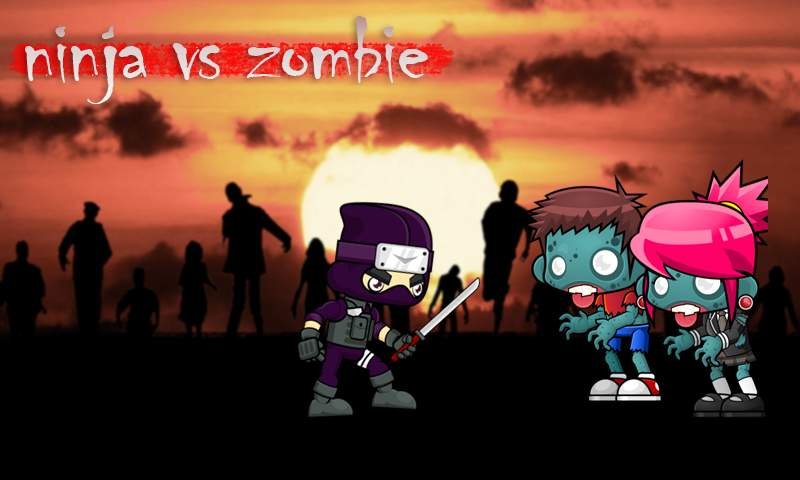
<style>
.page{position:relative;width:800px;height:480px;background:#000000}
.page>*{position:absolute;margin:0}
.t1{font:100px "Chiller-Regular";letter-spacing:-0.025em;color:#e0d6d6}
</style>
<div class="page">
<p class="t1" style="left:25px;top:16px;width:403px;height:88px">ninja vs zombie</p>
</div>
